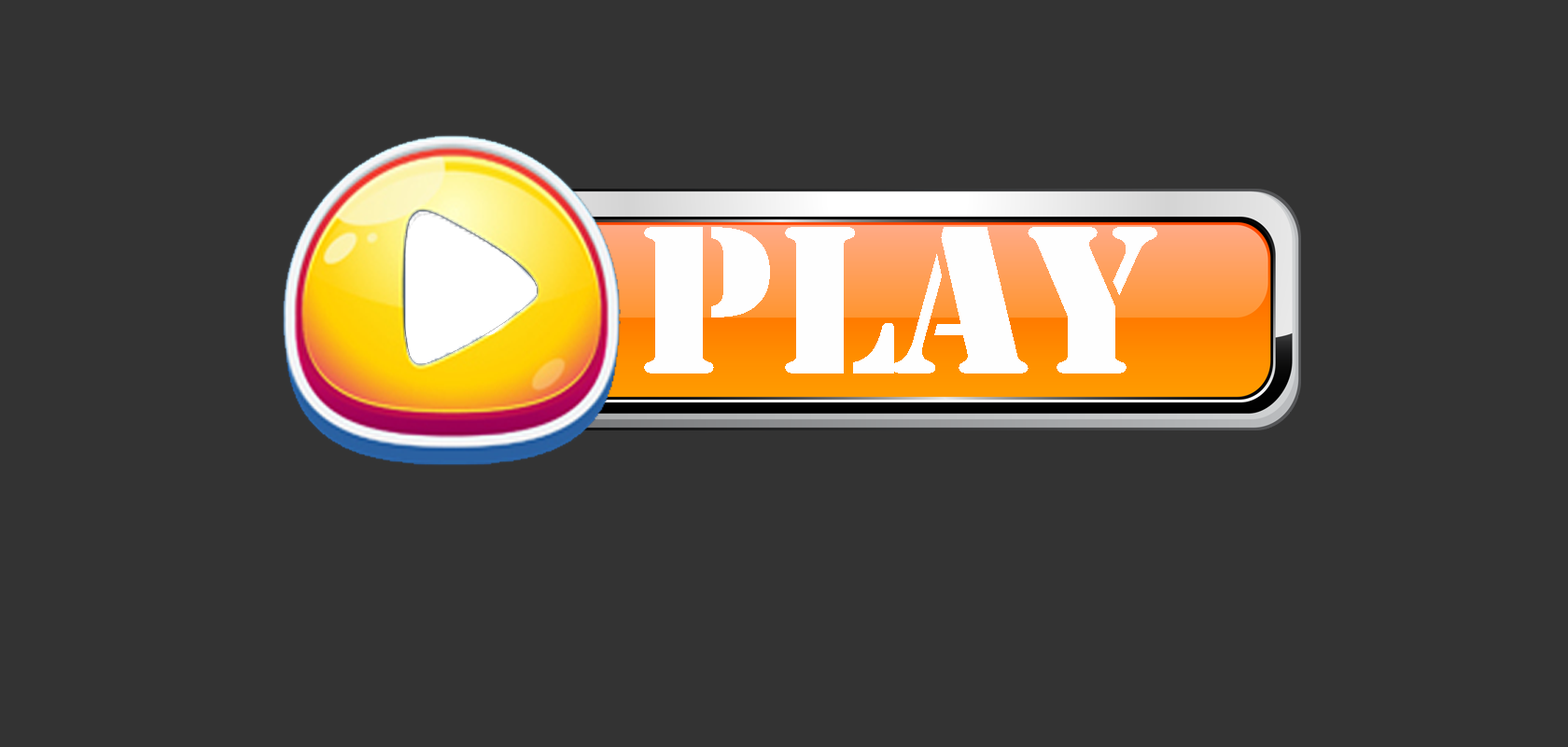
<style>
.page{position:relative;width:1568px;height:747px;background:#333333}
.page>*{position:absolute;margin:0}
.t1{font:196px "StencilStd";color:#fefefe}
</style>
<div class="page">
<p class="t1" style="left:644px;top:227px;width:513px;height:146px">Play</p>
</div>
